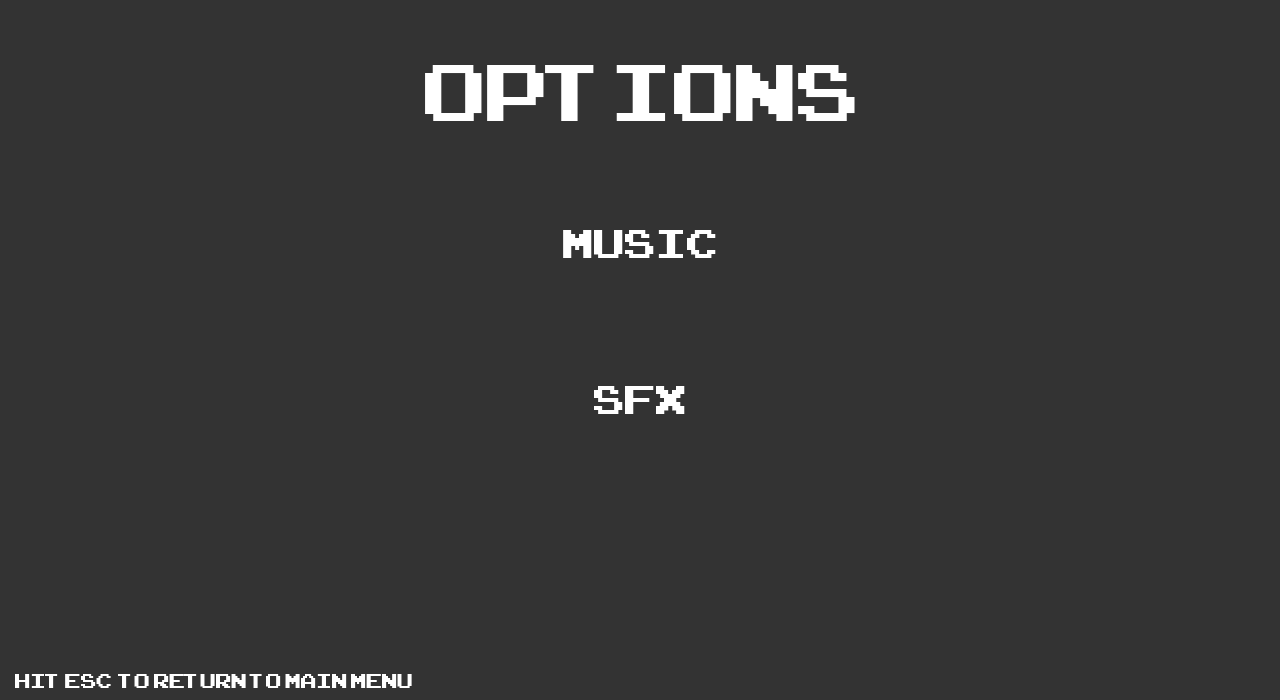
<style>
.page{position:relative;width:1280px;height:700px;background:#333333}
.page>*{position:absolute;margin:0}
.t1{font:113px "ArcadeClassic";color:#ffffff}
.t2{font:56.5px "ArcadeClassic";color:#ffffff}
.t3{font:28.2px "ArcadeClassic";color:#ffffff}
</style>
<div class="page">
<p class="t1" style="left:425px;top:65px;width:430px;height:56px">OPTIONS</p>
<p class="t2" style="left:563px;top:230px;width:153px;height:28px">music</p>
<p class="t2" style="left:594px;top:386px;width:91px;height:28px">sfx</p>
<p class="t3" style="left:15px;top:674px;width:397px;height:14px">hit esc  to return to main menu</p>
</div>
